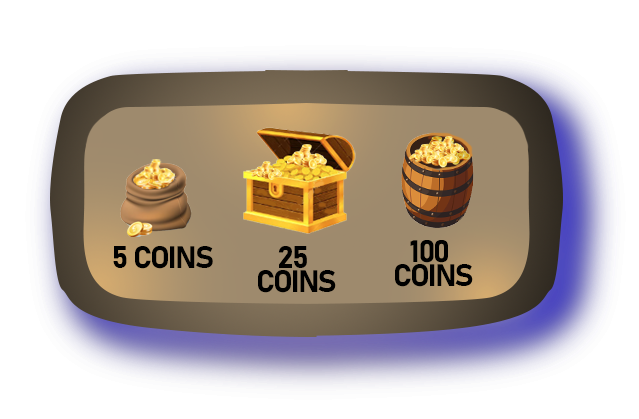
<style>
.page{position:relative;width:639px;height:419px;background:#ffffff}
.page>*{position:absolute;margin:0}
.t1{font:30.7px "Bahnschrift-Bold";letter-spacing:-0.05em;color:#000000}
.t2{font:30.7px/24.7px "Bahnschrift-Bold";letter-spacing:-0.05em;color:#000000}
</style>
<div class="page">
<p class="t1" style="left:113px;top:246px;width:100px;height:23px">5 COINS</p>
<p class="t2" style="left:258px;top:246px;width:78px;height:47px;text-align:center">25 <br>COINS</p>
<p class="t2" style="left:395px;top:240px;width:78px;height:47px;text-align:center">100 <br>COINS</p>
</div>
